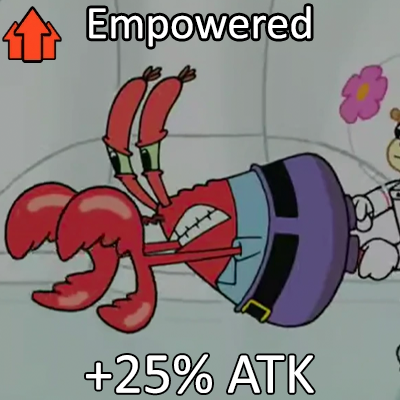
<style>
.page{position:relative;width:400px;height:400px}
.page>*{position:absolute;margin:0}
.t1{font:80px "Calibri";color:#ffffff}
.t2{font:100px "Calibri";color:#ffffff}
</style>
<div class="page">
<p class="t1" style="left:89px;top:6px;width:222px;height:41px">Empowered</p>
<p class="t2" style="left:86px;top:354px;width:228px;height:40px">+25% ATK</p>
</div>
